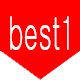
<style>
.page{position:relative;width:80px;height:80px;background:#ff0000}
.page>*{position:absolute;margin:0}
.t1{font:47.6px "Gulim";color:#fcfcfc;scale:0.54 1}
</style>
<div class="page">
<p class="t1" style="left:10px;top:16px;width:59px;height:34px">best1</p>
</div>
